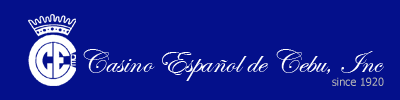
<style>
.page{position:relative;width:400px;height:100px;background:#04108b}
.page>*{position:absolute;margin:0}
.t1{font:33.3px "EdwardianScriptITC";color:#ffffff}
.t2{font:11.1px "Tahoma";color:#b5b5b5}
</style>
<div class="page">
<p class="t1" style="left:83px;top:49px;width:301px;height:32px">Casino Español de Cebu, Inc</p>
<p class="t2" style="left:332px;top:77px;width:52px;height:9px">since 1920</p>
</div>
